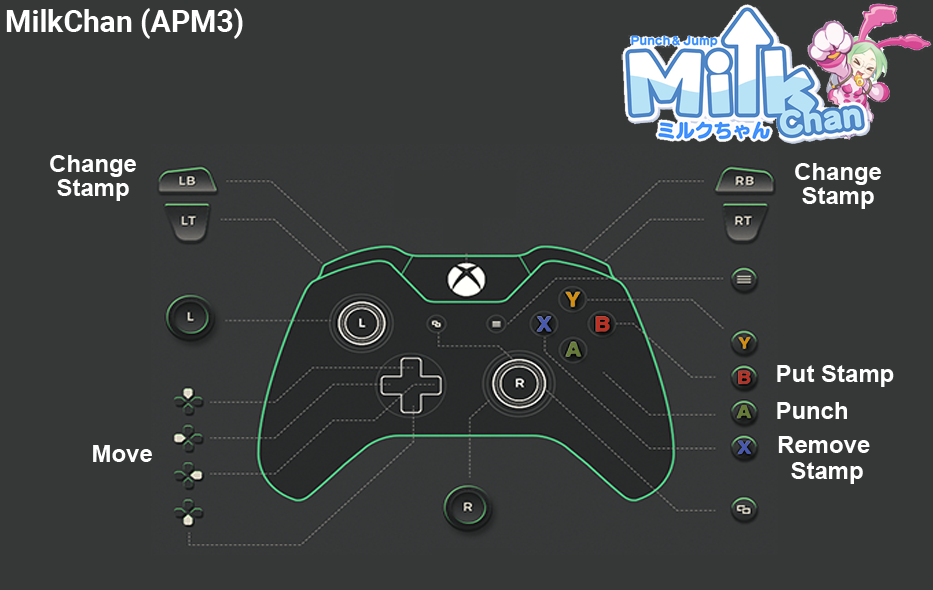
<style>
.page{position:relative;width:933px;height:590px;background:#363838}
.page>*{position:absolute;margin:0}
.t1{font:30px "Roboto-Bold";color:#ffffff}
.t2{font:24px/24px "Arial-BoldMT";color:#fefefe}
.t3{font:24px "Arial-BoldMT";color:#fefefe}
.t4{font:24px/26px "Arial-BoldMT";color:#fefefe}
</style>
<div class="page">
<p class="t1" style="left:6px;top:8px;width:237px;height:31px">MilkChan (APM3)</p>
<p class="t2" style="left:50px;top:155px;width:86px;height:46px;text-align:center">Change<br>Stamp</p>
<p class="t2" style="left:795px;top:163px;width:86px;height:46px;text-align:center">Change<br>Stamp</p>
<p class="t3" style="left:777px;top:365px;width:117px;height:22px">Put Stamp</p>
<p class="t3" style="left:777px;top:402px;width:70px;height:17px">Punch</p>
<p class="t4" style="left:778px;top:436px;width:92px;height:48px;text-align:center">Remove <br>Stamp</p>
<p class="t3" style="left:93px;top:445px;width:59px;height:17px">Move</p>
</div>
